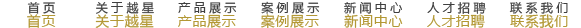
<style>
.page{position:relative;width:581px;height:28px;background:#ffffff}
.page>*{position:absolute;margin:0}
.t1{font:12px "MicrosoftYaHei";letter-spacing:0.28em;color:#3f3f3f}
.t2{font:12px "MicrosoftYaHei";letter-spacing:-0.24em;color:#3f3f3f}
.t3{font:14px "MicrosoftYaHei";letter-spacing:0.05em;color:#b39835}
.t4{font:12px "MicrosoftYaHei";letter-spacing:0.39em;color:#3f3f3f}
</style>
<div class="page">
<p class="t1" style="left:27px;top:1px;width:541px;height:13px"><span class="t2"> </span>首页      关于越星  产品展示  案例展示        新闻中心   人才招聘 联系我们</p>
<p class="t3" style="left:27px;top:14px;width:541px;height:15px"><span class="t4"> </span>首页   关于越星 产品展示 案例展示  新闻中心 人才招聘 联系我们</p>
</div>
